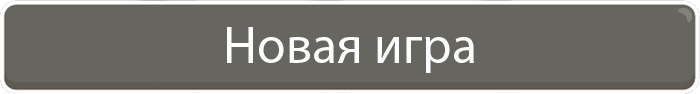
<style>
.page{position:relative;width:700px;height:94px;background:#66655f}
.page>*{position:absolute;margin:0}
.t1{font:52px "MyriadPro-Regular";color:#fdfdfd}
</style>
<div class="page">
<p class="t1" style="left:227px;top:27px;width:247px;height:46px">Новая игра</p>
</div>
